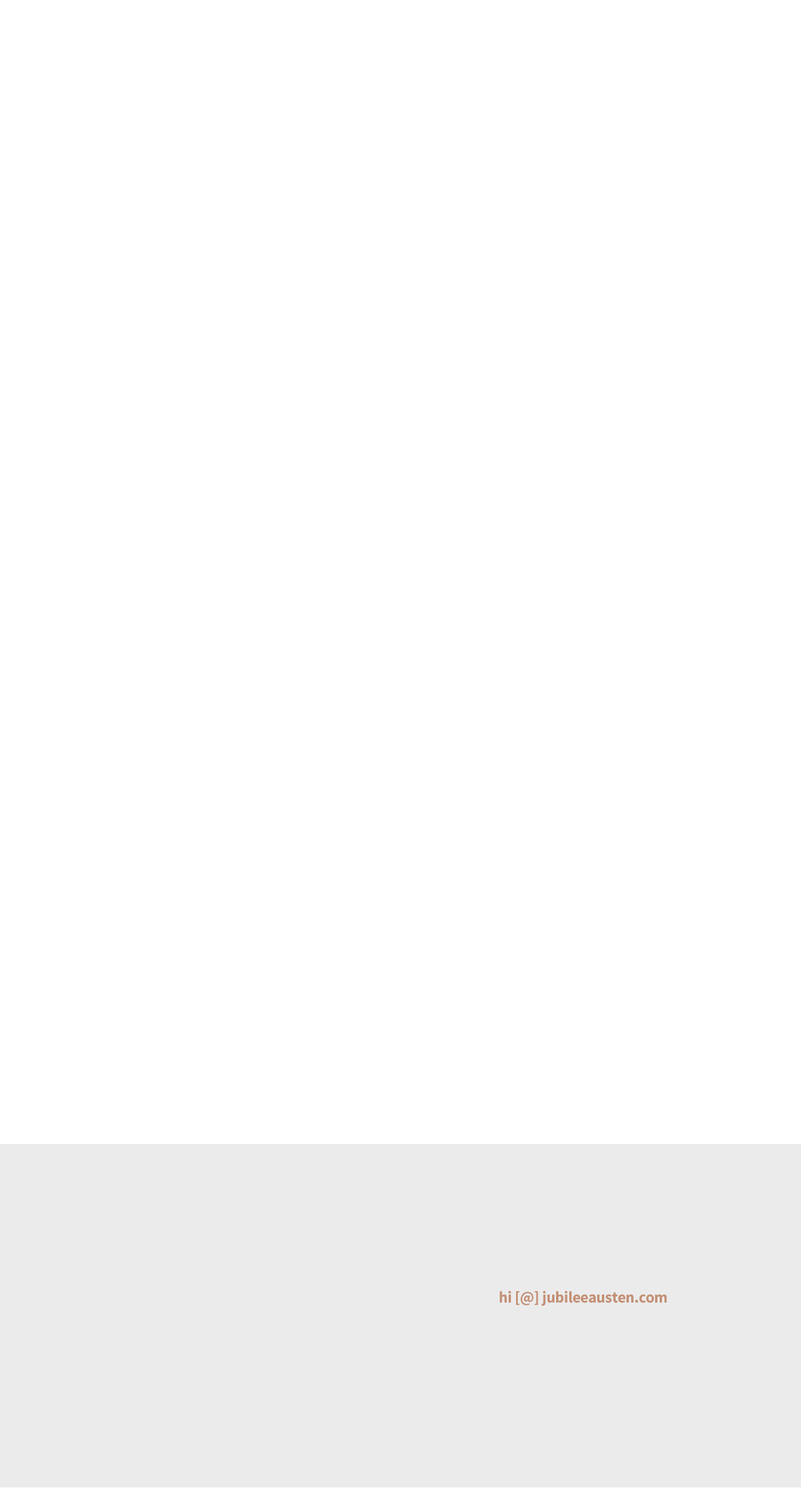
<style>
.page{position:relative;width:801px;height:1488px;background:#ffffff}
.page>*{position:absolute;margin:0}
.t1{font:16px "SourceSansPro-Bold";letter-spacing:-0.02em;color:#c49075}
</style>
<div class="page">
<p class="t1" style="left:500px;top:1291px;width:167px;height:15px">hi [@] jubileeausten.com</p>
</div>
